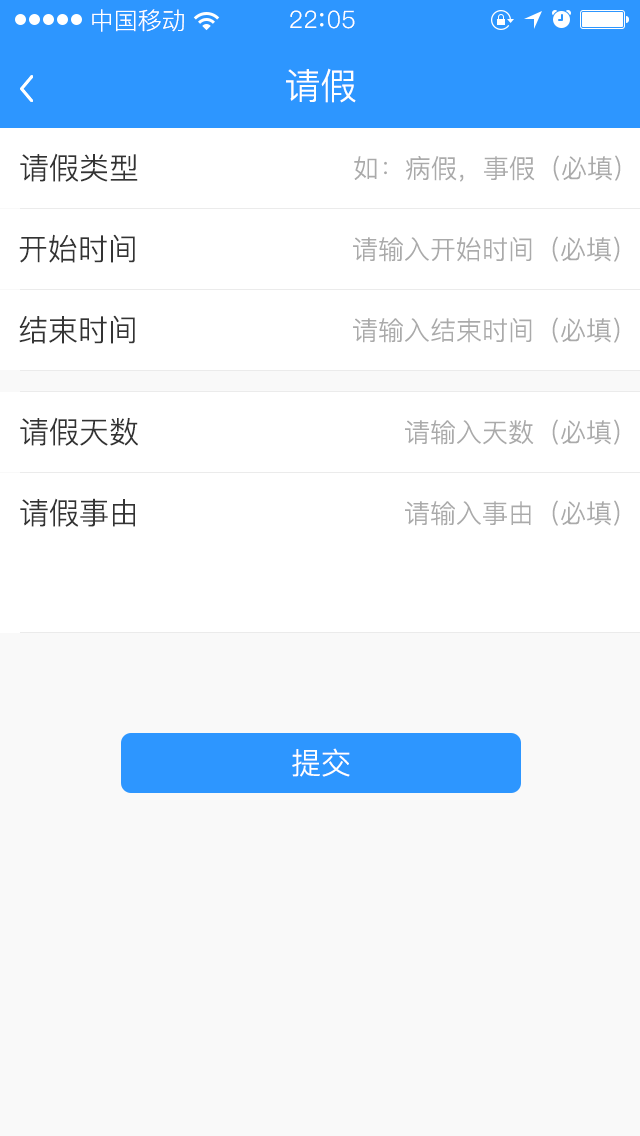
<style>
.page{position:relative;width:640px;height:1136px;background:#f9f9f9}
.page>*{position:absolute;margin:0}
.t1{font:24px "PingFang-SC-Regular";color:#ffffff}
.t2{font:24px "PingFang-SC-Regular";letter-spacing:0.03em;color:#ffffff}
.t3{font:36px "PingFang-SC-Regular";color:#ffffff}
.t4{font:30px "PingFang-SC-Regular";color:#333333}
.t5{font:26px "PingFang-SC-Regular";color:#aaaaaa}
.t6{font:30px "PingFang-SC-Regular";color:#ffffff}
</style>
<div class="page">
<p class="t1" style="left:92px;top:9px;width:92px;height:23px">中国移动</p>
<p class="t2" style="left:290px;top:10px;width:65px;height:19px">22 05</p>
<p class="t3" style="left:286px;top:68px;width:70px;height:35px">请假</p>
<p class="t4" style="left:20px;top:153px;width:118px;height:29px">请假类型</p>
<p class="t5" style="left:354px;top:155px;width:267px;height:27px">如：病假，事假（必填）</p>
<p class="t4" style="left:19px;top:234px;width:116px;height:29px">开始时间</p>
<p class="t5" style="left:353px;top:236px;width:267px;height:26px">请输入开始时间（必填）</p>
<p class="t4" style="left:19px;top:315px;width:116px;height:29px">结束时间</p>
<p class="t5" style="left:353px;top:317px;width:267px;height:26px">请输入结束时间（必填）</p>
<p class="t4" style="left:20px;top:417px;width:118px;height:29px">请假天数</p>
<p class="t5" style="left:405px;top:419px;width:215px;height:26px">请输入天数（必填）</p>
<p class="t4" style="left:20px;top:498px;width:115px;height:29px">请假事由</p>
<p class="t5" style="left:405px;top:500px;width:215px;height:26px">请输入事由（必填）</p>
<p class="t6" style="left:292px;top:748px;width:58px;height:29px">提交</p>
</div>
